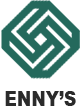
<style>
.page{position:relative;width:80px;height:111px;background:#ffffff}
.page>*{position:absolute;margin:0}
.t1{font:21.4px "Arial-Black";color:#2b2b2b;text-transform:uppercase;scale:0.8 1}
</style>
<div class="page">
<p class="t1" style="left:5px;top:91px;width:71px;height:15px">Enny’s</p>
</div>
